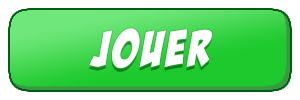
<style>
.page{position:relative;width:300px;height:100px;background:#ffffff}
.page>*{position:absolute;margin:0}
.t1{font:50px "BadaBoomBB";letter-spacing:0.08em;color:#ffffff}
</style>
<div class="page">
<p class="t1" style="left:89px;top:28px;width:123px;height:40px">jOUER</p>
</div>
